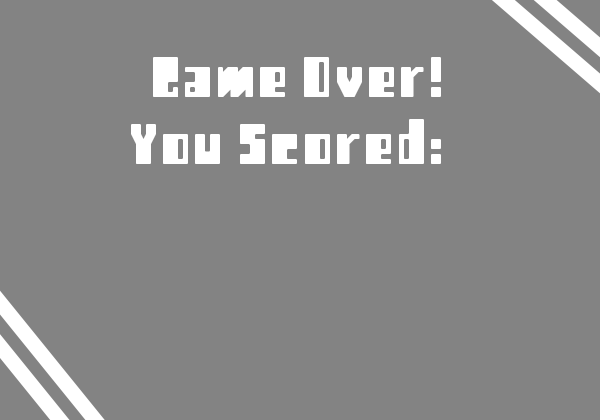
<style>
.page{position:relative;width:600px;height:420px;background:#838383}
.page>*{position:absolute;margin:0}
.t1{font:80px "Retro";color:#ffffff}
</style>
<div class="page">
<p class="t1" style="left:153px;top:57px;width:288px;height:40px">Game Over!</p>
<p class="t1" style="left:131px;top:119px;width:310px;height:45px">You Scored:</p>
</div>
